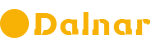
<style>
.page{position:relative;width:150px;height:50px;background:#ffffff}
.page>*{position:absolute;margin:0}
.t1{font:31.3px "Dirga-Extra-Bold";color:#f7b205}
</style>
<div class="page">
<p class="t1" style="left:34px;top:12px;width:118px;height:23px">Dalnar</p>
</div>
